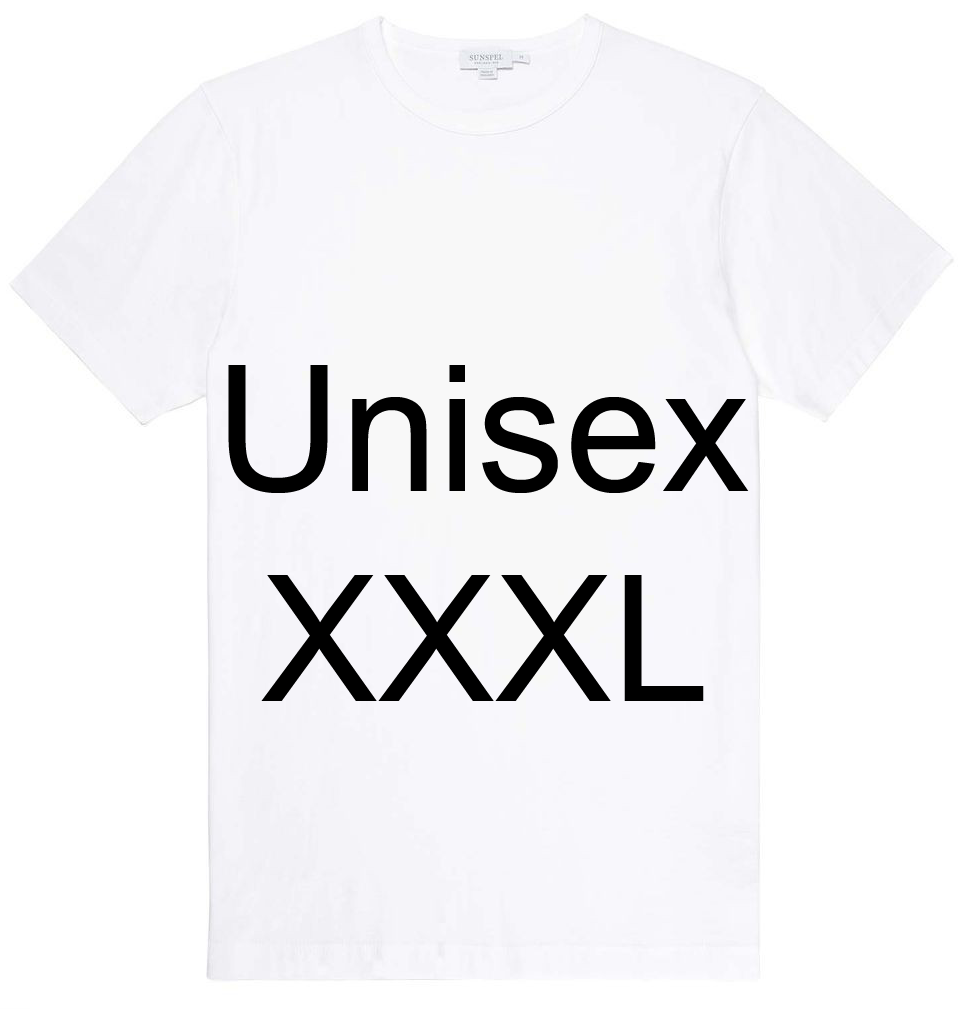
<style>
.page{position:relative;width:964px;height:1009px;background:#ffffff}
.page>*{position:absolute;margin:0}
.t1{font:175px "ArialMT";color:#000000}
</style>
<div class="page">
<p class="t1" style="left:228px;top:365px;width:521px;height:336px;text-align:center">Unisex<br>XXXL</p>
</div>
